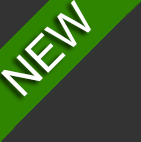
<style>
.page{position:relative;width:141px;height:142px;background:#333333}
.page>*{position:absolute;margin:0}
.t1{font:46px "ArialMT";color:#ffffff}
</style>
<div class="page">
<p class="t1" style="left:1px;top:0px;width:90px;height:97px;rotate:-45deg">NEW</p>
</div>
